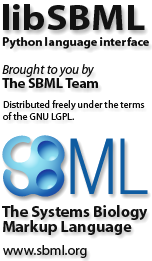
<style>
.page{position:relative;width:152px;height:261px;background:#ffffff}
.page>*{position:absolute;margin:0}
.t1{font:36px "Myriad-Bold";color:#040404;scale:1.1 1}
.t2{font:12.5px/14px "Myriad-Bold";color:#000000}
.t3{font:13px/14px "Myriad-Italic";color:#000000}
.t4{font:14px/14px "Myriad-Bold";color:#000000}
.t5{font:10px/12px "Myriad-Roman";color:#000000}
.t6{font:16px/15px "Myriad-Bold";color:#040404}
.t7{font:14px "Myriad-Roman";color:#000000}
</style>
<div class="page">
<p class="t1" style="left:3px;top:4px;width:142px;height:26px">libSBML</p>
<p class="t2" style="left:2px;top:37px;width:147px;height:51px">Python language interface<br><span class="t3"><br>Brought to you by<br></span><span class="t4">The SBML Team</span></p>
<p class="t5" style="left:3px;top:100px;width:142px;height:20px">Distributed freely under the terms <br>of the GNU LGPL.</p>
<p class="t6" style="left:2px;top:205px;width:146px;height:30px">The Systems Biology<br>Markup Language</p>
<p class="t7" style="left:3px;top:245px;width:84px;height:13px">www.sbml.org</p>
</div>
